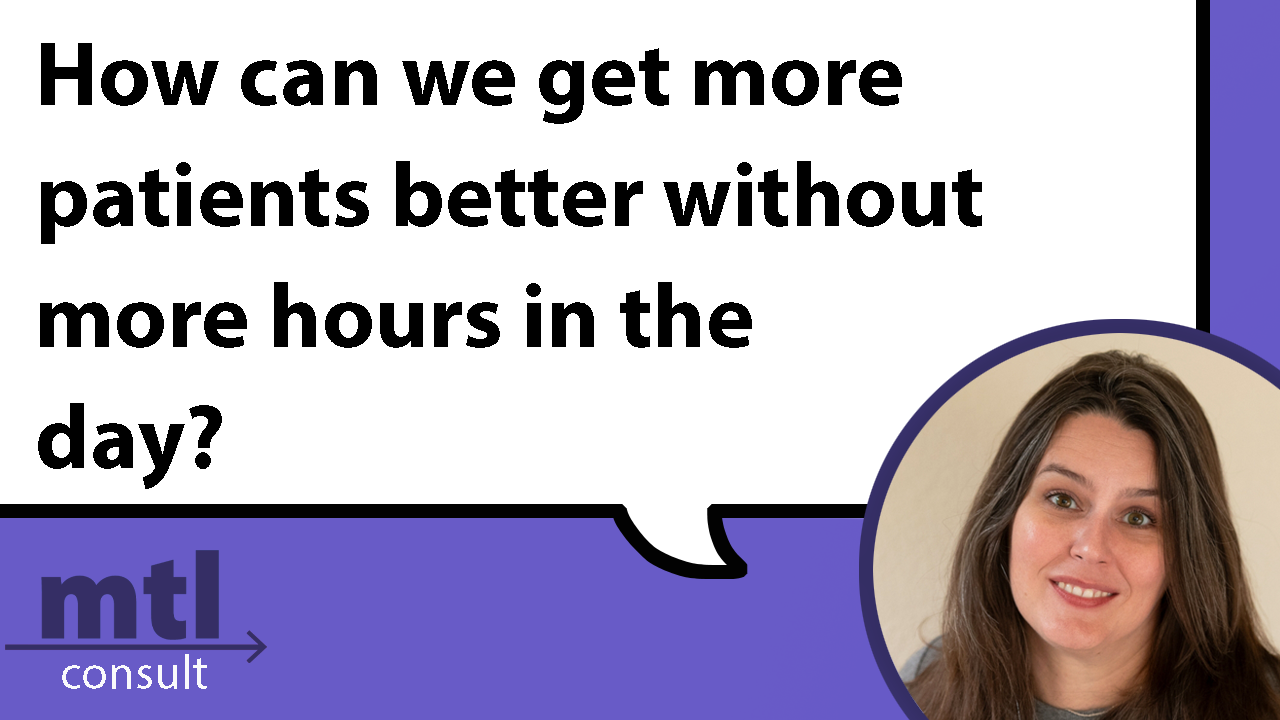
<style>
.page{position:relative;width:1280px;height:720px;background:#ffffff}
.page>*{position:absolute;margin:0}
.t1{font:91.7px "MyriadPro-Bold";color:#000000}
</style>
<div class="page">
<p class="t1" style="left:38px;top:43px;width:944px;height:446px">How can we get more<br>patients better without<br>more hours in the <br>day?</p>
</div>
